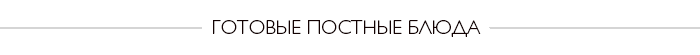
<style>
.page{position:relative;width:700px;height:55px;background:#ffffff}
.page>*{position:absolute;margin:0}
.t1{font:20px "GillSansLightC";color:#130202;text-transform:uppercase}
</style>
<div class="page">
<p class="t1" style="left:213px;top:20px;width:268px;height:17px">готовые постные блюда</p>
</div>
